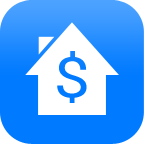
<style>
.page{position:relative;width:144px;height:144px;background:#007aff}
.page>*{position:absolute;margin:0}
.t1{font:56.1px "Roboto-Regular";color:#007aff;scale:1.15 1}
</style>
<div class="page">
<p class="t1" style="left:57px;top:51px;width:30px;height:52px">$</p>
</div>
